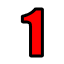
<style>
.page{position:relative;width:64px;height:64px;background:#ffffff}
.page>*{position:absolute;margin:0}
.t1{font:60px "Impact";color:#ff0000}
</style>
<div class="page">
<p class="t1" style="left:22px;top:9px;width:21px;height:47px">1</p>
</div>
